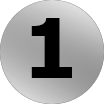
<style>
.page{position:relative;width:104px;height:104px}
.page>*{position:absolute;margin:0}
.t1{font:83.3px "Verdana-Bold";color:#000000}
</style>
<div class="page">
<p class="t1" style="left:31px;top:18px;width:41px;height:60px">1</p>
</div>
